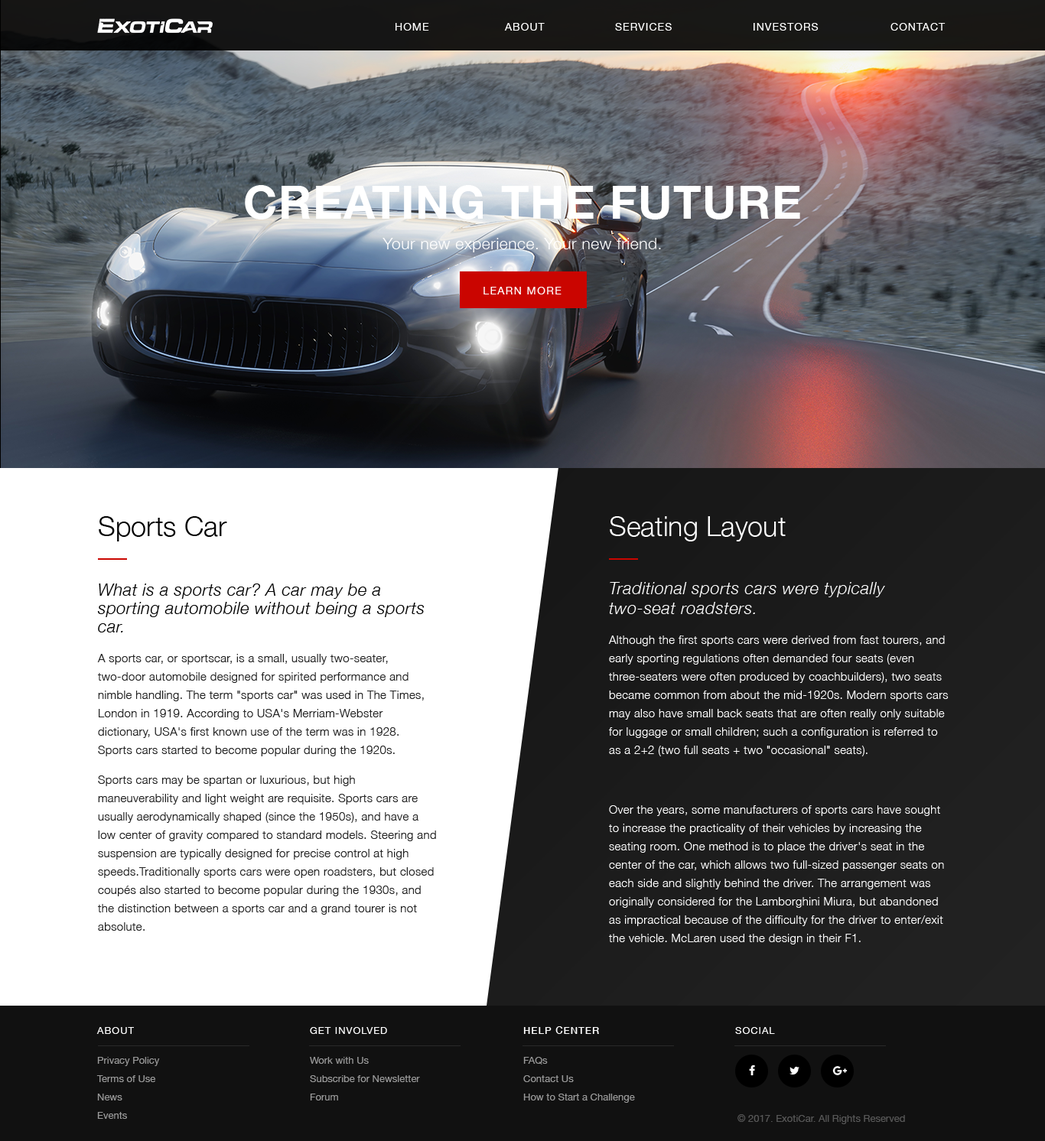
<style>
.page{position:relative;width:1045px;height:1141px;background:#ffffff}
.page>*{position:absolute;margin:0}
.t1{font:10.7px "HelveticaNeue";letter-spacing:0.075em;color:#ffffff;text-transform:uppercase}
.t2{font:16.1px "HelveticaNeue-Light";letter-spacing:0.025em;color:#ffffff}
.t3{font:46px "HelveticaNeue-Bold";letter-spacing:0.025em;color:#ffffff;text-transform:uppercase}
.t4{font:10.7px "HelveticaNeue";letter-spacing:0.1em;color:#ffffff;text-transform:uppercase}
.t5{font:11.5px/18.4px "HelveticaNeue-Light";letter-spacing:0.025em;color:#222222}
.t6{font:27.5px/18.4px "HelveticaNeue-Light";color:#000000}
.t7{font:16.8px/18.4px "HelveticaNeue-LightItalic";letter-spacing:0.025em;color:#000000}
.t8{font:11.5px/18.4px "HelveticaNeue-Light";letter-spacing:0.025em;color:#ffffff}
.t9{font:27.5px/18.4px "HelveticaNeue-Light";color:#ffffff}
.t10{font:16.8px "HelveticaNeue-LightItalic";letter-spacing:0.025em;color:#ffffff}
.t11{font:9.9px/18.4px "HelveticaNeue";color:#999999}
.t12{font:9.9px "HelveticaNeue";letter-spacing:0.075em;color:#ffffff;text-transform:uppercase}
.t13{font:9.9px "HelveticaNeue-Medium";letter-spacing:0.075em;color:#ffffff;text-transform:uppercase}
.t14{font:9.9px "HelveticaNeue";color:#585858}
</style>
<div class="page">
<p class="t1" style="left:395px;top:23px;width:550px;height:8px">Home   About   Services   investors   Contact</p>
<p class="t2" style="left:245px;top:185px;width:555px;height:67px;text-align:center"><span class="t3">creating the future<br></span>Your new experience. Your new friend.</p>
<p class="t4" style="left:483px;top:287px;width:78px;height:7px">Learn more</p>
<p class="t5" style="left:97px;top:516px;width:339px;height:415px"><span class="t6">Sports Car<br><br></span><span class="t7">What is a sports car? A car may be a sporting automobile without being a sports car.<br></span>A sports car, or sportscar, is a small, usually two-seater, two-door automobile designed for spirited performance and nimble handling. The term "sports car" was used in The Times, London in 1919. According to USA's Merriam-Webster dictionary, USA's first known use of the term was in 1928. Sports cars started to become popular during the 1920s.<br>Sports cars may be spartan or luxurious, but high maneuverability and light weight are requisite. Sports cars are usually aerodynamically shaped (since the 1950s), and have a low center of gravity compared to standard models. Steering and suspension are typically designed for precise control at high speeds.Traditionally sports cars were open roadsters, but closed coupés also started to become popular during the 1930s, and the distinction between a sports car and a grand tourer is not absolute.</p>
<p class="t8" style="left:608px;top:516px;width:340px;height:429px"><span class="t9">Seating Layout<br><br></span><span class="t10">Traditional sports cars were typically two-seat roadsters.<br></span>Although the first sports cars were derived from fast tourers, and early sporting regulations often demanded four seats (even three-seaters were often produced by coachbuilders), two seats became common from about the mid-1920s. Modern sports cars may also have small back seats that are often really only suitable for luggage or small children; such a configuration is referred to as a 2+2 (two full seats + two "occasional" seats).<br><br>Over the years, some manufacturers of sports cars have sought to increase the practicality of their vehicles by increasing the seating room. One method is to place the driver's seat in the center of the car, which allows two full-sized passenger seats on each side and slightly behind the driver. The arrangement was originally considered for the Lamborghini Miura, but abandoned as impractical because of the difficulty for the driver to enter/exit the vehicle. McLaren used the design in their F1.</p>
<p class="t11" style="left:96px;top:1027px;width:64px;height:92px"><span class="t12">About<br></span>Privacy Policy<br>Terms of Use<br>News<br>Events</p>
<p class="t11" style="left:310px;top:1027px;width:110px;height:74px"><span class="t12">Get Involved<br></span>Work with Us<br>Subscribe for Newsletter<br>Forum</p>
<p class="t11" style="left:523px;top:1027px;width:112px;height:76px"><span class="t13">Help Center<br></span>FAQs<br>Contact Us<br>How to Start a Challenge</p>
<p class="t12" style="left:735px;top:1027px;width:40px;height:7px">Social</p>
<p class="t14" style="left:737px;top:1114px;width:168px;height:10px">© 2017. ExotiCar. All Rights Reserved</p>
</div>
